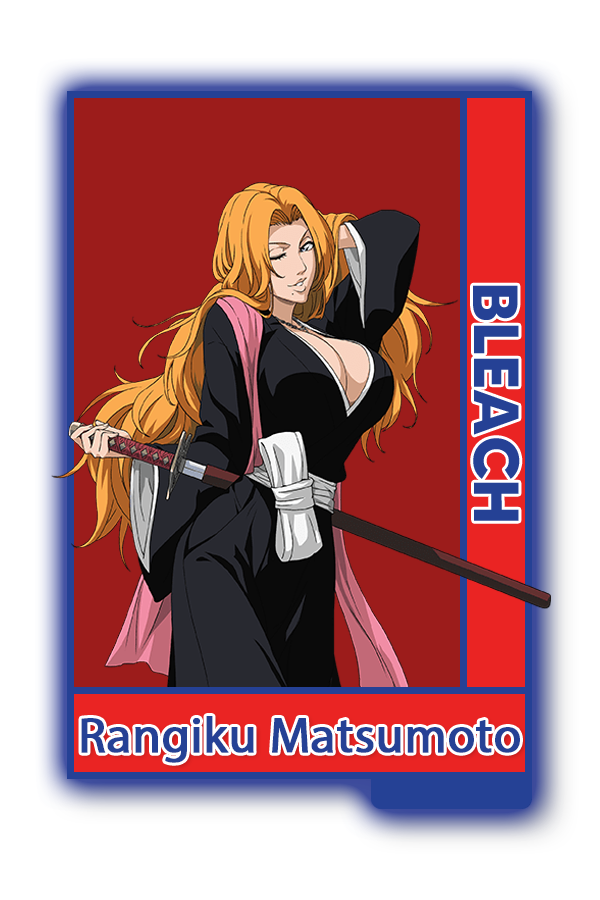
<style>
.page{position:relative;width:600px;height:900px;background:#ffffff}
.page>*{position:absolute;margin:0}
.t1{font:63.6px "MADETOMMY-Bold";color:#254195}
.t2{font:50px "MyriadPro-Regular";color:#254195;font-weight:bold}
</style>
<div class="page">
<p class="t1" style="left:473px;top:285px;width:47px;height:236px;rotate:90deg">BLEACH</p>
<p class="t2" style="left:81px;top:716px;width:439px;height:47px">Rangiku Matsumoto</p>
</div>
